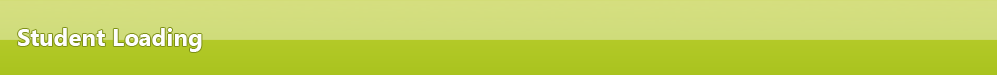
<style>
.page{position:relative;width:997px;height:75px}
.page>*{position:absolute;margin:0}
.t1{font:24px "SegoeUI-Bold";color:#fefefe}
</style>
<div class="page">
<p class="t1" style="left:18px;top:28px;width:184px;height:24px">Student Loading</p>
</div>
